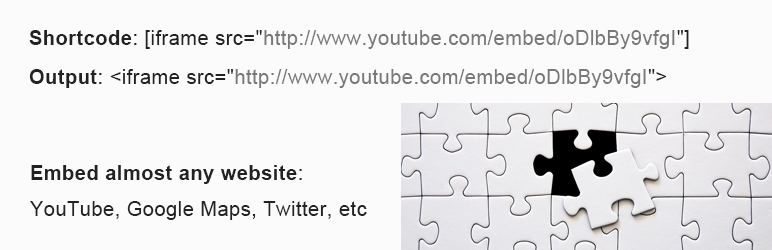
<style>
.page{position:relative;width:772px;height:250px;background:#fbfbfb}
.page>*{position:absolute;margin:0}
.t1{font:20px "ArialMT";letter-spacing:0.025em;color:#787878}
.t2{font:20px "Arial-BoldMT";letter-spacing:0.025em;color:#222222}
.t3{font:20px "ArialMT";letter-spacing:0.025em;color:#222222}
.t4{font:20px/34.6px "ArialMT";letter-spacing:0.025em;color:#222222}
.t5{font:20px/34.6px "Arial-BoldMT";letter-spacing:0.025em;color:#222222}
</style>
<div class="page">
<p class="t1" style="left:29px;top:30px;width:660px;height:19px"><span class="t2">Shortcode</span><span class="t3">: [iframe src="</span>http://www.youtube.com/embed/oDlbBy9vfgI<span class="t3">"]</span></p>
<p class="t1" style="left:29px;top:69px;width:638px;height:19px"><span class="t2">Output</span><span class="t3">: &lt;iframe src="</span>http://www.youtube.com/embed/oDlbBy9vfgI<span class="t3">"&gt;</span></p>
<p class="t4" style="left:30px;top:165px;width:337px;height:55px"><span class="t5">Embed almost any website</span>:<br>YouTube, Google Maps, Twitter, etc</p>
</div>
